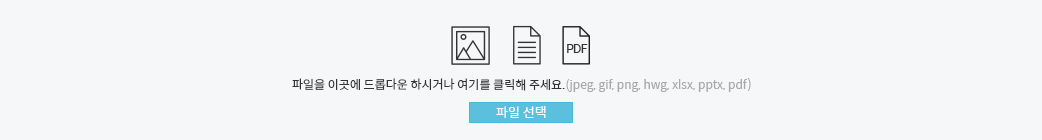
<style>
.page{position:relative;width:1042px;height:140px;background:#f6f7f8}
.page>*{position:absolute;margin:0}
.t1{font:12px "SpoqaHanSans-Regular";letter-spacing:-0.1em;color:#333333}
.t2{font:12px "SpoqaHanSans-Regular";color:#a9a9a9}
.t3{font:12px "SpoqaHanSans-Regular";color:#333333}
.t4{font:13px "SpoqaHanSans-Regular";color:#ffffff}
</style>
<div class="page">
<p class="t1" style="left:567px;top:44px;width:21px;height:9px">PDF</p>
<p class="t2" style="left:292px;top:78px;width:459px;height:14px"><span class="t3">파일을 이곳에 드롭다운 하시거나 여기를 클릭해 주세요.</span>(jpeg, gif, png, hwg, xlsx, pptx, pdf)</p>
<p class="t4" style="left:496px;top:106px;width:50px;height:12px">파일 선택</p>
</div>
